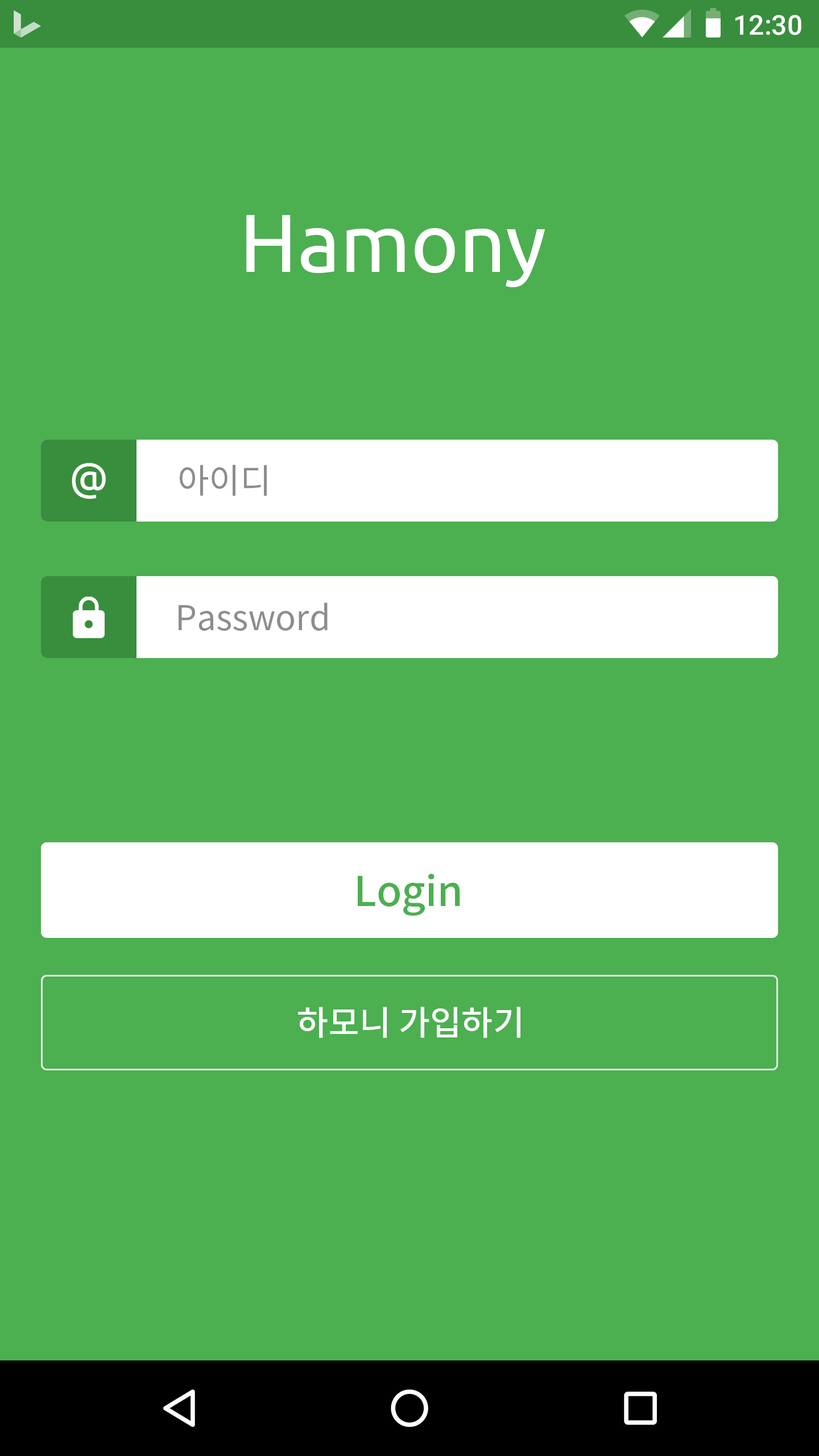
<style>
.page{position:relative;width:819px;height:1456px;background:#4caf50}
.page>*{position:absolute;margin:0}
.t1{font:27.3px "Roboto-Medium";color:#ffffff}
.t2{font:81.9px "Ubuntu";color:#ffffff}
.t3{font:40.9px "Ubuntu";color:#ffffff}
.t4{font:34.1px "NotoSansCJKkr-Regular";color:#8d8d8d}
.t5{font:40.9px "NotoSansCJKkr-Medium";color:#4caf50}
.t6{font:34.1px "NotoSansCJKkr-Medium";color:#ffffff}
</style>
<div class="page">
<p class="t1" style="left:735px;top:15px;width:66px;height:20px">12:30</p>
<p class="t2" style="left:246px;top:215px;width:299px;height:72px">Hamony</p>
<p class="t3" style="left:72px;top:463px;width:34px;height:36px">@</p>
<p class="t4" style="left:180px;top:465px;width:87px;height:31px">아이디</p>
<p class="t4" style="left:179px;top:602px;width:149px;height:29px">Password</p>
<p class="t5" style="left:358px;top:874px;width:102px;height:42px">Login</p>
<p class="t6" style="left:298px;top:1007px;width:222px;height:31px">하모니 가입하기</p>
</div>
